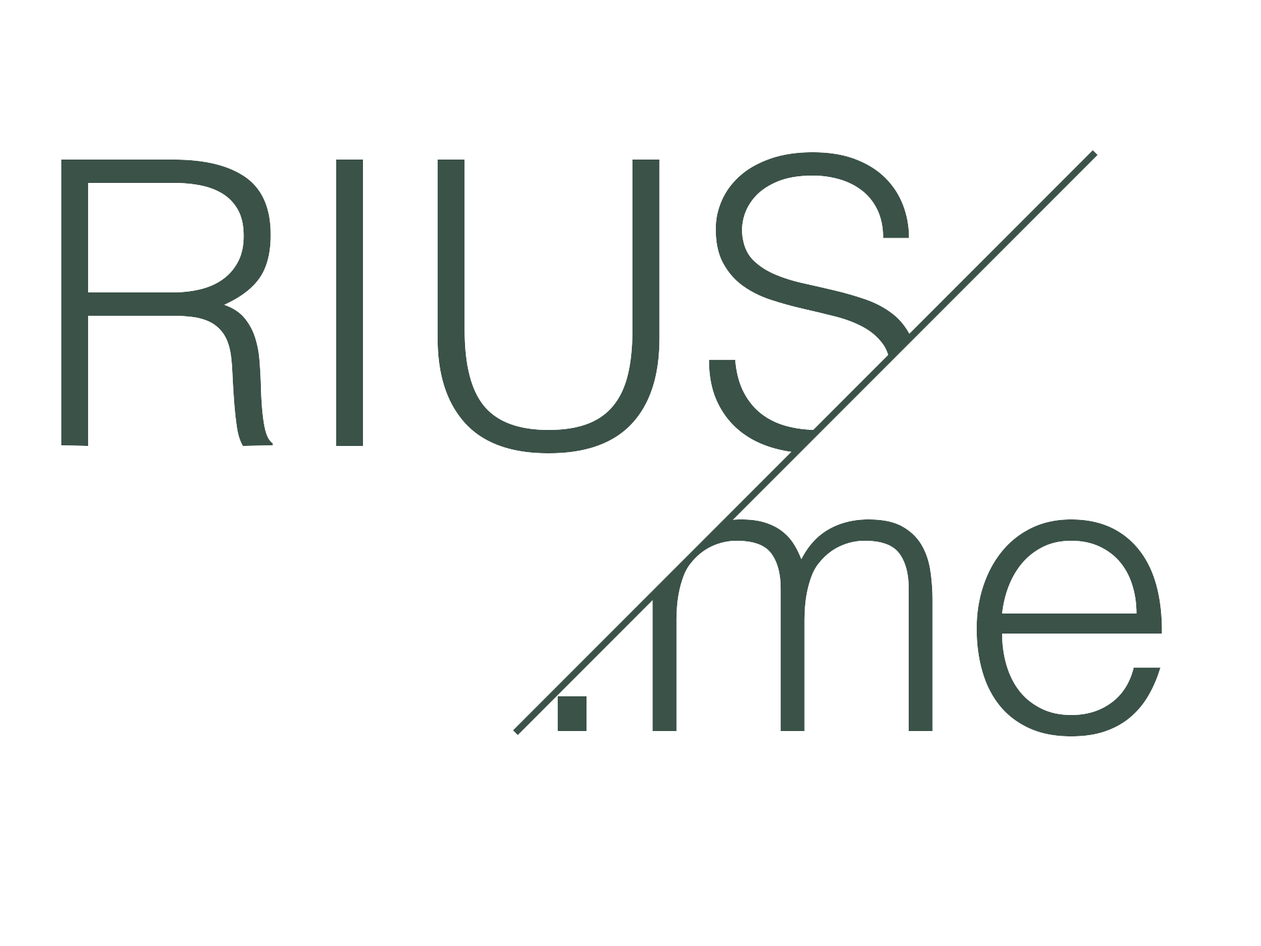
<style>
.page{position:relative;width:1261px;height:946px;background:#ffffff}
.page>*{position:absolute;margin:0}
.t1{font:397.6px "Helvetica-Light";color:#3b5249}
</style>
<div class="page">
<p class="t1" style="left:61px;top:152px;width:856px;height:301px">RIUS</p>
<p class="t1" style="left:557px;top:519px;width:605px;height:217px">.me</p>
</div>
